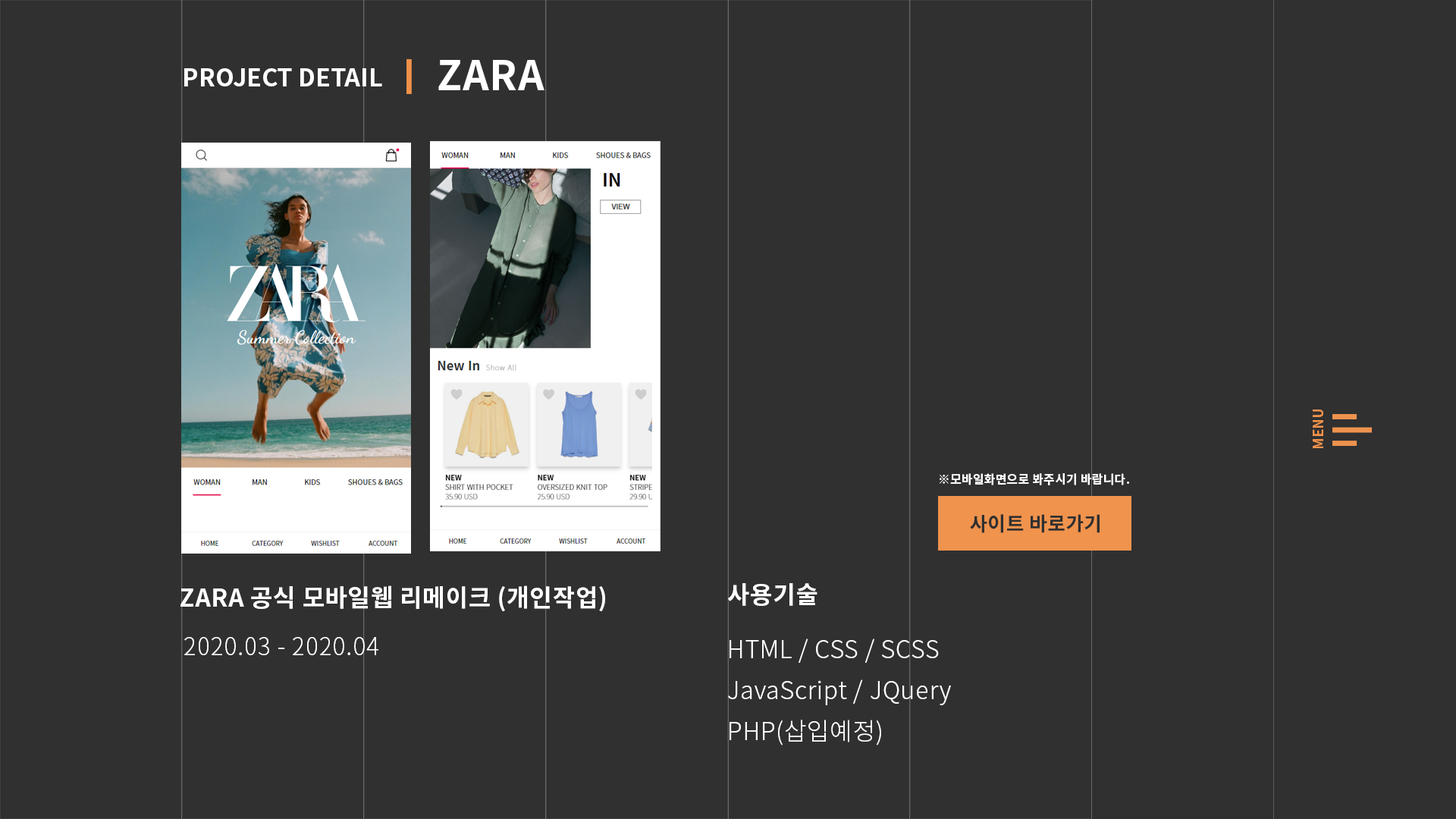
<style>
.page{position:relative;width:1456px;height:819px;background:#303030}
.page>*{position:absolute;margin:0}
.t1{font:41.1px "NotoSansKR-Bold";letter-spacing:0.025em;color:#ffffff}
.t2{font:24.4px "NotoSansKR-Bold";color:#ffffff}
.t3{font:13.6px "NotoSansKR-Bold";letter-spacing:0.025em;color:#f0934c}
.t4{font:12.2px "NotoSansKR-Bold";letter-spacing:0.025em;color:#ffffff}
.t5{font:19.5px "NotoSansKR-Bold";letter-spacing:0.025em;color:#303030}
.t6{font:24.4px "NotoSansKR-Bold";letter-spacing:0.025em;color:#ffffff}
.t7{font:24.4px "NotoSansKR-Light";letter-spacing:0.025em;color:#ffffff}
</style>
<div class="page">
<p class="t1" style="left:438px;top:60px;width:106px;height:30px">ZARA</p>
<p class="t2" style="left:184px;top:68px;width:198px;height:18px">PROJECT DETAIL</p>
<p class="t3" style="left:1313px;top:409px;width:10px;height:39px;rotate:-90deg">MENU</p>
<p class="t4" style="left:940px;top:473px;width:189px;height:12px">※모바일화면으로 봐주시기 바랍니다.</p>
<p class="t5" style="left:970px;top:514px;width:130px;height:19px">사이트 바로가기</p>
<p class="t6" style="left:180px;top:585px;width:425px;height:27px">ZARA 공식 모바일웹 리메이크 (개인작업)</p>
<p class="t6" style="left:727px;top:583px;width:90px;height:23px">사용기술</p>
<p class="t7" style="left:184px;top:637px;width:194px;height:18px">2020.03 - 2020.04</p>
<p class="t7" style="left:730px;top:639px;width:209px;height:24px">HTML / CSS / SCSS</p>
<p class="t7" style="left:728px;top:679px;width:223px;height:26px">JavaScript / JQuery</p>
<p class="t7" style="left:730px;top:720px;width:151px;height:25px">PHP(삽입예정)</p>
</div>
